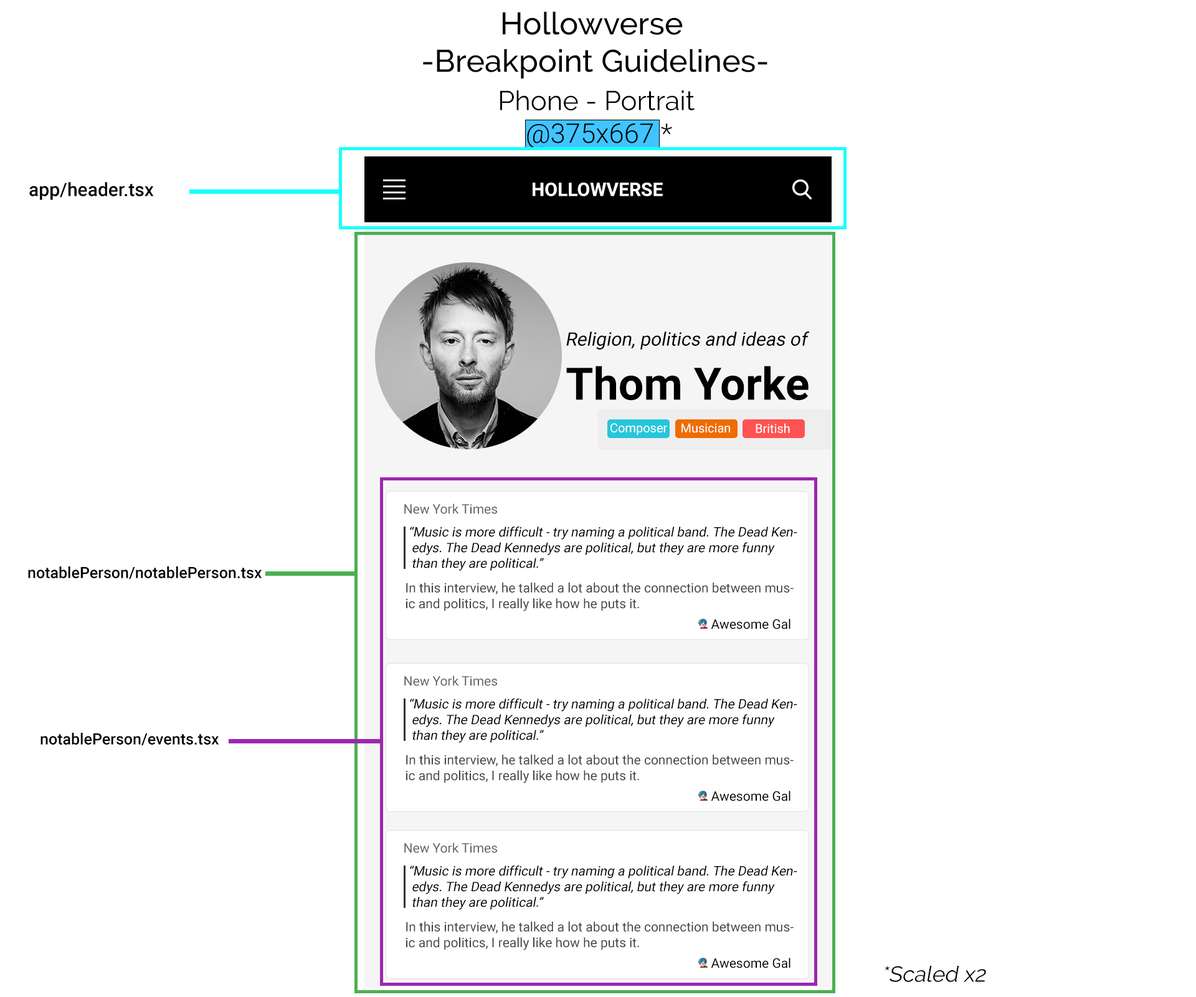
<style>
.page{position:relative;width:1196px;height:997px;background:#ffffff}
.page>*{position:absolute;margin:0}
.t1{font:31.2px "Raleway-Medium";color:#000000}
.t2{font:27.2px "Raleway-Regular";color:#000000}
.t3{font:27.2px "Roboto-Light";color:#000000}
.t4{font:18.7px "Roboto-Medium";color:#000000}
.t5{font:18.7px "Roboto-Bold";color:#ffffff}
.t6{font:18.7px "Roboto-Regular";color:#000000;font-style:italic}
.t7{font:44.9px "Roboto-Bold";color:#000000}
.t8{font:12.5px "Roboto-Regular";color:#ffffff}
.t9{font:13.1px "Roboto-Regular";color:#616161}
.t10{font:13.1px "Roboto-Regular";color:#000000;font-style:italic}
.t11{font:15.6px "Roboto-Medium";color:#000000}
.t12{font:13.1px "Roboto-Regular";color:#424242}
.t13{font:13.1px "Roboto-Regular";color:#000000}
.t14{font:21.8px "Raleway-Regular";color:#000000;font-style:italic}
</style>
<div class="page">
<p class="t1" style="left:423px;top:11px;width:345px;height:68px">Hollowverse<br>-Breakpoint Guidelines-</p>
<p class="t2" style="left:500px;top:90px;width:195px;height:59px">Phone - Portrait<br>    <span class="t3">@375x667 *</span></p>
<p class="t4" style="left:29px;top:182px;width:125px;height:18px">app/header.tsx</p>
<p class="t5" style="left:533px;top:183px;width:130px;height:13px">HOLLOWVERSE</p>
<p class="t6" style="left:566px;top:331px;width:244px;height:19px">Religion, politics and ideas of</p>
<p class="t7" style="left:566px;top:366px;width:243px;height:35px">Thom Yorke</p>
<p class="t8" style="left:611px;top:423px;width:56px;height:12px">Composer</p>
<p class="t8" style="left:682px;top:423px;width:48px;height:10px">Musician</p>
<p class="t8" style="left:756px;top:423px;width:34px;height:10px">British</p>
<p class="t9" style="left:404px;top:503px;width:93px;height:11px">New York Times</p>
<p class="t10" style="left:410px;top:526px;width:387px;height:45px">“Music is more difficult - try naming a political band. The Dead Ken-<br>  edys. The Dead Kennedys are political, but they are more funny <br>  than they are political.”</p>
<p class="t11" style="left:28px;top:566px;width:234px;height:13px">notablePerson/notablePerson.tsx</p>
<p class="t12" style="left:406px;top:583px;width:388px;height:28px">In this interview, he talked a lot about the connection between mus-<br>ic and politics, I really like how he puts it.</p>
<p class="t13" style="left:711px;top:619px;width:80px;height:10px">Awesome Gal</p>
<p class="t9" style="left:404px;top:675px;width:93px;height:11px">New York Times</p>
<p class="t10" style="left:410px;top:698px;width:387px;height:45px">“Music is more difficult - try naming a political band. The Dead Ken-<br>  edys. The Dead Kennedys are political, but they are more funny <br>  than they are political.”</p>
<p class="t11" style="left:40px;top:733px;width:179px;height:13px">notablePerson/events.tsx</p>
<p class="t12" style="left:406px;top:754px;width:388px;height:29px">In this interview, he talked a lot about the connection between mus-<br>ic and politics, I really like how he puts it.</p>
<p class="t13" style="left:711px;top:791px;width:80px;height:10px">Awesome Gal</p>
<p class="t9" style="left:404px;top:842px;width:93px;height:11px">New York Times</p>
<p class="t10" style="left:410px;top:865px;width:387px;height:45px">“Music is more difficult - try naming a political band. The Dead Ken-<br>  edys. The Dead Kennedys are political, but they are more funny <br>  than they are political.”</p>
<p class="t12" style="left:406px;top:921px;width:388px;height:29px">In this interview, he talked a lot about the connection between mus-<br>ic and politics, I really like how he puts it.</p>
<p class="t13" style="left:711px;top:958px;width:80px;height:10px">Awesome Gal</p>
<p class="t14" style="left:885px;top:966px;width:101px;height:16px">*Scaled x2</p>
</div>
